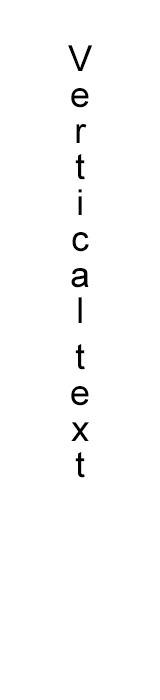
<style>
.page{position:relative;width:160px;height:700px;background:#ffffff}
.page>*{position:absolute;margin:0}
.t1{font:36px "ArialMT";color:#000000}
</style>
<div class="page">
<p class="t1" style="left:68px;top:45px;width:25px;height:433px">Vertical text</p>
</div>
